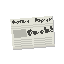
<style>
.page{position:relative;width:64px;height:64px;background:#ffffff}
.page>*{position:absolute;margin:0}
.t1{font:5.6px "Superscript";letter-spacing:0.08em;color:#444440}
.t2{font:8.3px "Superscript";letter-spacing:0.08em;color:#444440}
</style>
<div class="page">
<p class="t1" style="left:12px;top:18px;width:40px;height:6px;rotate:-4deg">Some Paper</p>
<p class="t2" style="left:27px;top:26px;width:26px;height:10px;rotate:-8deg">Ouch!</p>
</div>
